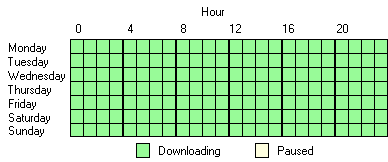
<style>
.page{position:relative;width:388px;height:162px;background:#ffffff}
.page>*{position:absolute;margin:0}
.t1{font:12px "MS Sans Serif";color:#000000}
</style>
<div class="page">
<p class="t1" style="left:202px;top:7px;width:22px;height:9px">Hour</p>
<p class="t1" style="left:76px;top:24px;width:5px;height:9px">0</p>
<p class="t1" style="left:128px;top:24px;width:5px;height:9px">4</p>
<p class="t1" style="left:181px;top:24px;width:5px;height:9px">8</p>
<p class="t1" style="left:230px;top:24px;width:11px;height:9px">12</p>
<p class="t1" style="left:283px;top:24px;width:11px;height:9px">16</p>
<p class="t1" style="left:337px;top:24px;width:11px;height:9px">20</p>
<p class="t1" style="left:9px;top:43px;width:37px;height:11px">Monday</p>
<p class="t1" style="left:8px;top:57px;width:40px;height:11px">Tuesday</p>
<p class="t1" style="left:8px;top:71px;width:57px;height:11px">Wednesday</p>
<p class="t1" style="left:8px;top:85px;width:43px;height:11px">Thursday</p>
<p class="t1" style="left:9px;top:99px;width:27px;height:11px">Friday</p>
<p class="t1" style="left:9px;top:113px;width:41px;height:11px">Saturday</p>
<p class="t1" style="left:9px;top:126px;width:35px;height:11px">Sunday</p>
<p class="t1" style="left:159px;top:146px;width:61px;height:11px">Downloading</p>
<p class="t1" style="left:278px;top:146px;width:35px;height:9px">Paused</p>
</div>
